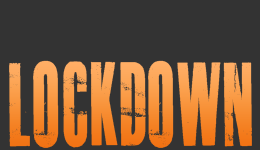
<style>
.page{position:relative;width:260px;height:150px;background:#333333}
.page>*{position:absolute;margin:0}
.t1{font:116.9px "MASTERPLAN-TRIAL";scale:0.73 1}
</style>
<div class="page">
<p class="t1" style="left:9px;top:60px;width:243px;height:88px">LOCKDOWN</p>
</div>
